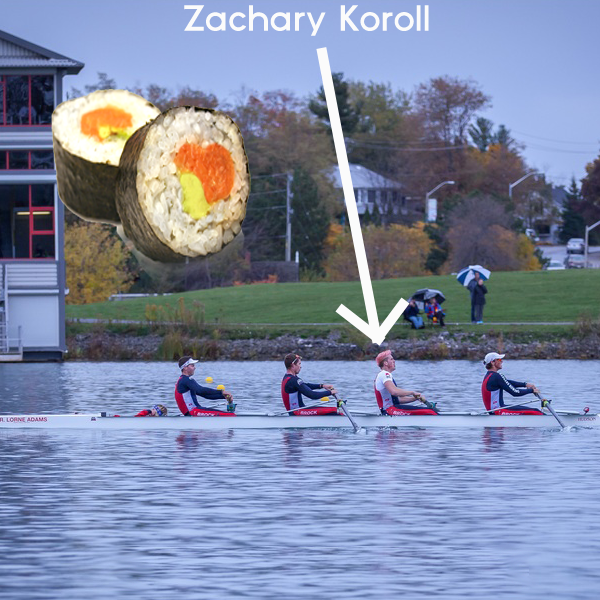
<style>
.page{position:relative;width:600px;height:600px}
.page>*{position:absolute;margin:0}
.t1{font:36px "Medium";color:#fbfbfb}
</style>
<div class="page">
<p class="t1" style="left:184px;top:5px;width:245px;height:31px">Zachary Koroll</p>
</div>
